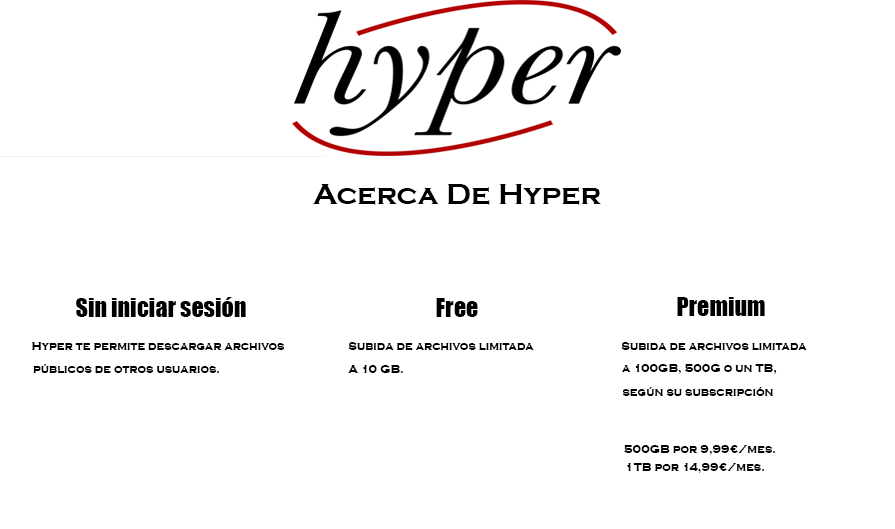
<style>
.page{position:relative;width:895px;height:529px;background:#ffffff}
.page>*{position:absolute;margin:0}
.t1{font:30px "CopperplateGothic-Bold";color:#000000}
.t2{font:24px "Impact";color:#000000}
.t3{font:12px "CopperplateGothic-Bold";color:#000000}
</style>
<div class="page">
<p class="t1" style="left:313px;top:184px;width:288px;height:21px">Acerca De Hyper</p>
<p class="t2" style="left:76px;top:297px;width:170px;height:20px">Sin iniciar sesión</p>
<p class="t2" style="left:436px;top:298px;width:42px;height:19px">Free</p>
<p class="t2" style="left:677px;top:297px;width:88px;height:19px">Premium</p>
<p class="t3" style="left:32px;top:342px;width:252px;height:8px">Hyper te permite descargar archivos</p>
<p class="t3" style="left:348px;top:342px;width:186px;height:8px">Subida de archivos limitada</p>
<p class="t3" style="left:621px;top:342px;width:186px;height:8px">Subida de archivos limitada</p>
<p class="t3" style="left:33px;top:364px;width:186px;height:9px">públicos de otros usuarios.</p>
<p class="t3" style="left:348px;top:365px;width:55px;height:8px">A 10 GB.</p>
<p class="t3" style="left:622px;top:364px;width:155px;height:10px">a 100GB, 500G o un TB,</p>
<p class="t3" style="left:622px;top:387px;width:151px;height:9px">según su subscripción</p>
<p class="t3" style="left:624px;top:445px;width:151px;height:10px">500GB por 9,99€/mes.</p>
<p class="t3" style="left:627px;top:463px;width:137px;height:10px">1TB por 14,99€/mes.</p>
</div>
